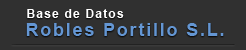
<style>
.page{position:relative;width:246px;height:50px;background:#303030}
.page>*{position:absolute;margin:0}
.t1{font:12px "Arial-BoldMT";letter-spacing:0.1em;color:#ffffff}
.t2{font:18px "Arial-BoldMT";letter-spacing:0.1em;color:#6496d3}
</style>
<div class="page">
<p class="t1" style="left:27px;top:9px;width:97px;height:9px">Base de Datos</p>
<p class="t2" style="left:26px;top:23px;width:198px;height:13px">Robles Portillo S.L.</p>
</div>
